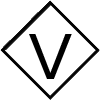
<style>
.page{position:relative;width:100px;height:100px;background:#ffffff}
.page>*{position:absolute;margin:0}
.t1{font:67.1px "ProximaNova-Regular";color:#000000}
</style>
<div class="page">
<p class="t1" style="left:29px;top:34px;width:43px;height:45px">V</p>
</div>
